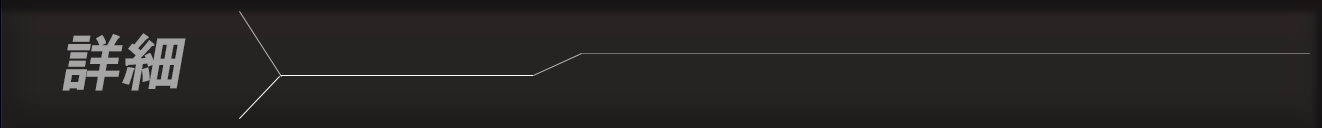
<style>
.page{position:relative;width:1322px;height:128px;background:#262323}
.page>*{position:absolute;margin:0}
.t1{font:61px "HGPGothicE";color:#a6a5a5;font-style:italic}
</style>
<div class="page">
<p class="t1" style="left:62px;top:33px;width:124px;height:58px">詳細</p>
</div>
